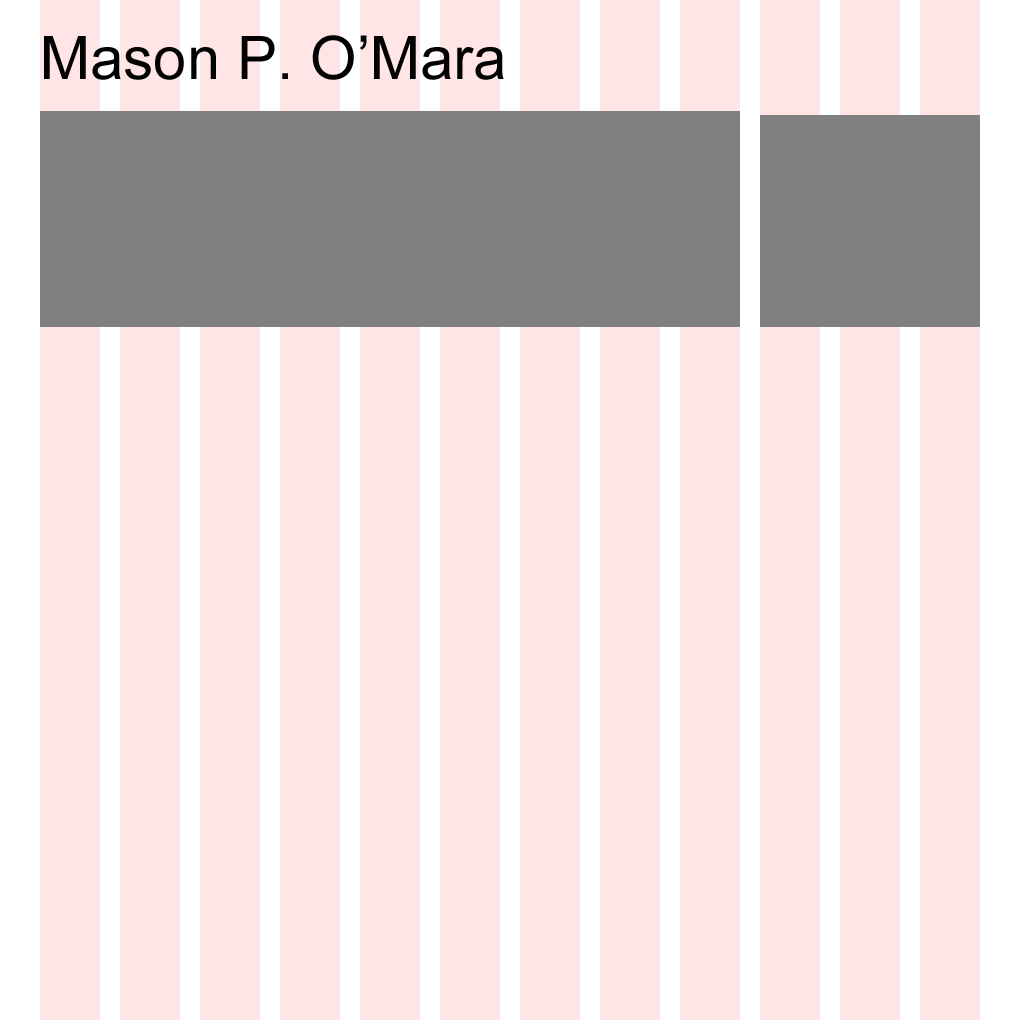
<style>
.page{position:relative;width:1020px;height:1020px;background:#ffe5e5}
.page>*{position:absolute;margin:0}
.t1{font:60px "ArialMT";color:#010101}
</style>
<div class="page">
<p class="t1" style="left:44px;top:35px;width:460px;height:45px">Mason P. O’Mara</p>
</div>
